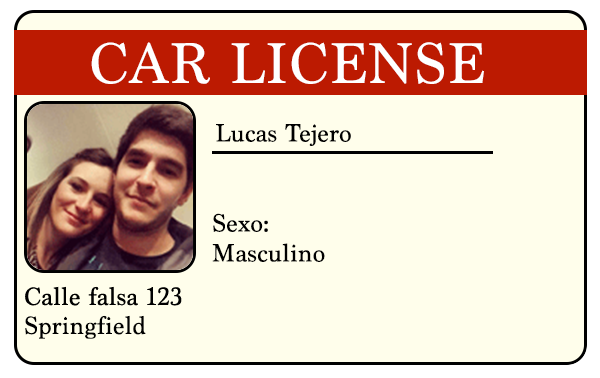
<style>
.page{position:relative;width:600px;height:378px;background:#fffeeb}
.page>*{position:absolute;margin:0}
.t1{font:60px "Marion-Regular";letter-spacing:0.013em;color:#ffffff}
.t2{font:26px "Marion-Regular";letter-spacing:0.013em;color:#000000}
</style>
<div class="page">
<p class="t1" style="left:91px;top:42px;width:393px;height:42px">CAR LICENSE</p>
<p class="t2" style="left:216px;top:124px;width:135px;height:22px">Lucas Tejero</p>
<p class="t2" style="left:213px;top:213px;width:55px;height:19px">Sexo:</p>
<p class="t2" style="left:212px;top:243px;width:113px;height:19px">Masculino</p>
<p class="t2" style="left:25px;top:315px;width:121px;height:24px">Springfield</p>
</div>
